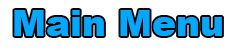
<style>
.page{position:relative;width:240px;height:50px;background:#ffffff}
.page>*{position:absolute;margin:0}
.t1{font:36px "Arial-Black";color:#00a8ff}
</style>
<div class="page">
<p class="t1" style="left:14px;top:10px;width:208px;height:26px">Main Menu</p>
</div>
